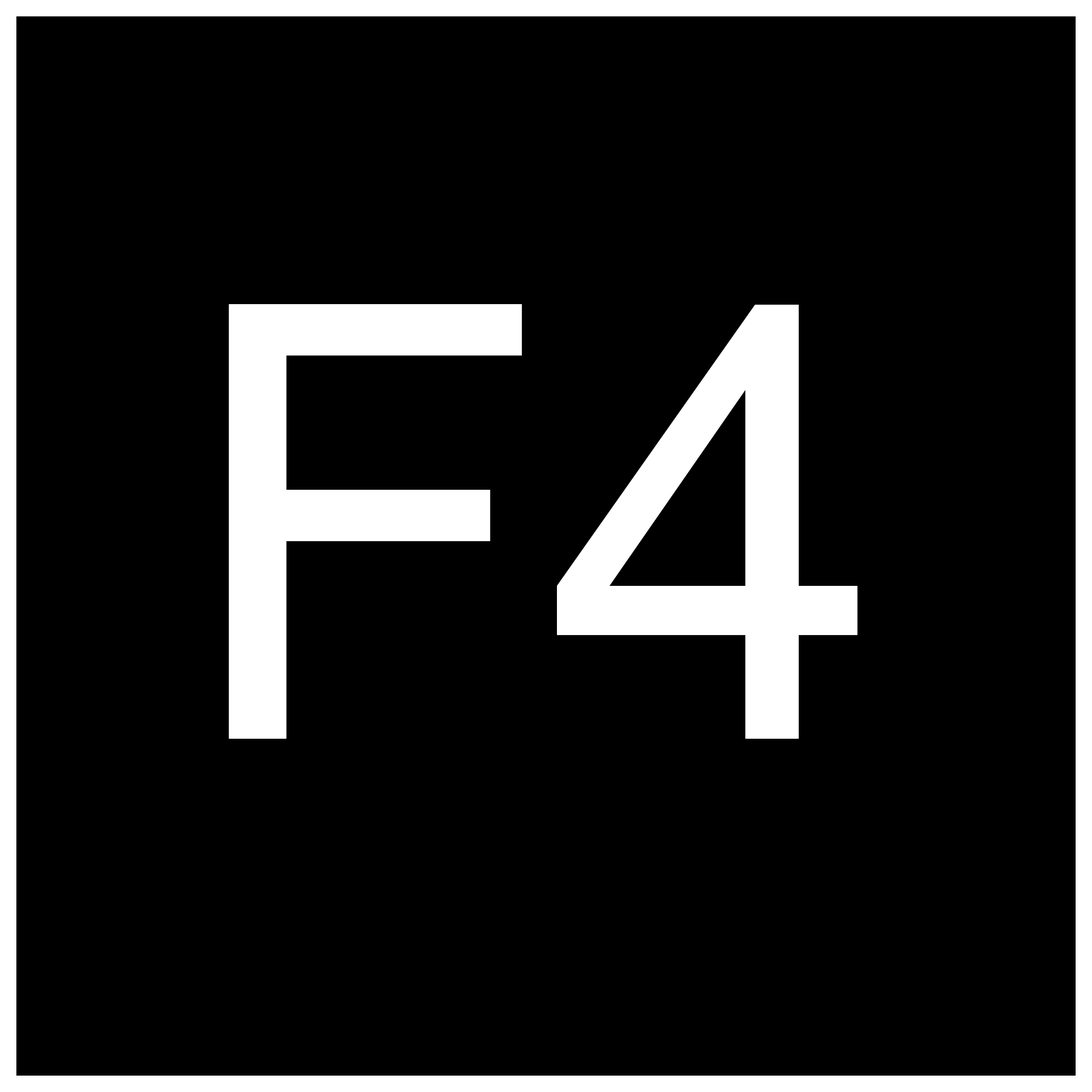
<style>
.page{position:relative;width:1092px;height:1092px;background:#000000}
.page>*{position:absolute;margin:0}
.t1{font:606.7px "ArialMT";color:#ffffff}
</style>
<div class="page">
<p class="t1" style="left:229px;top:304px;width:629px;height:435px">F4</p>
</div>
